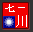
<style>
.page{position:relative;width:33px;height:32px;background:#f20000}
.page>*{position:absolute;margin:0}
.t1{font:10.4px "SimSun";color:#ffffff}
.t2{font:11.7px "SimSun";color:#ffffff}
</style>
<div class="page">
<p class="t1" style="left:5px;top:4px;width:20px;height:8px">七一</p>
<p class="t2" style="left:16px;top:15px;width:11px;height:12px">川</p>
</div>
